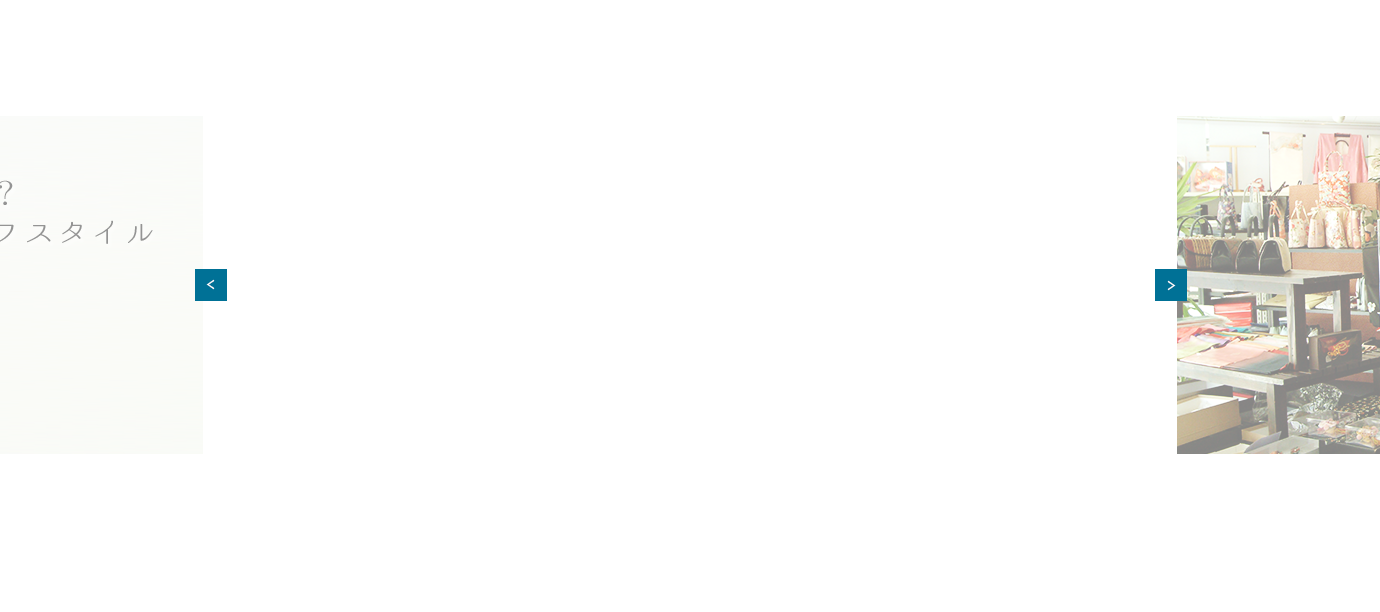
<style>
.page{position:relative;width:1380px;height:612px;background:#ffffff}
.page>*{position:absolute;margin:0}
.t1{font:29px/39px "02UtsukushiMincho";letter-spacing:0.16em;color:#949494}
.t2{font:14px "UDReiminPro-Heavy";letter-spacing:0.1em;color:#ffffff;scale:0.76 1}
</style>
<div class="page">
<p class="t1" style="left:0px;top:180px;width:153px;height:64px">知ってはりまっか？<br>江一のきものライフスタイル</p>
<p class="t2" style="left:206px;top:279px;width:9px;height:11px;rotate:180deg">＞</p>
<p class="t2" style="left:1167px;top:280px;width:9px;height:11px">＞</p>
</div>
